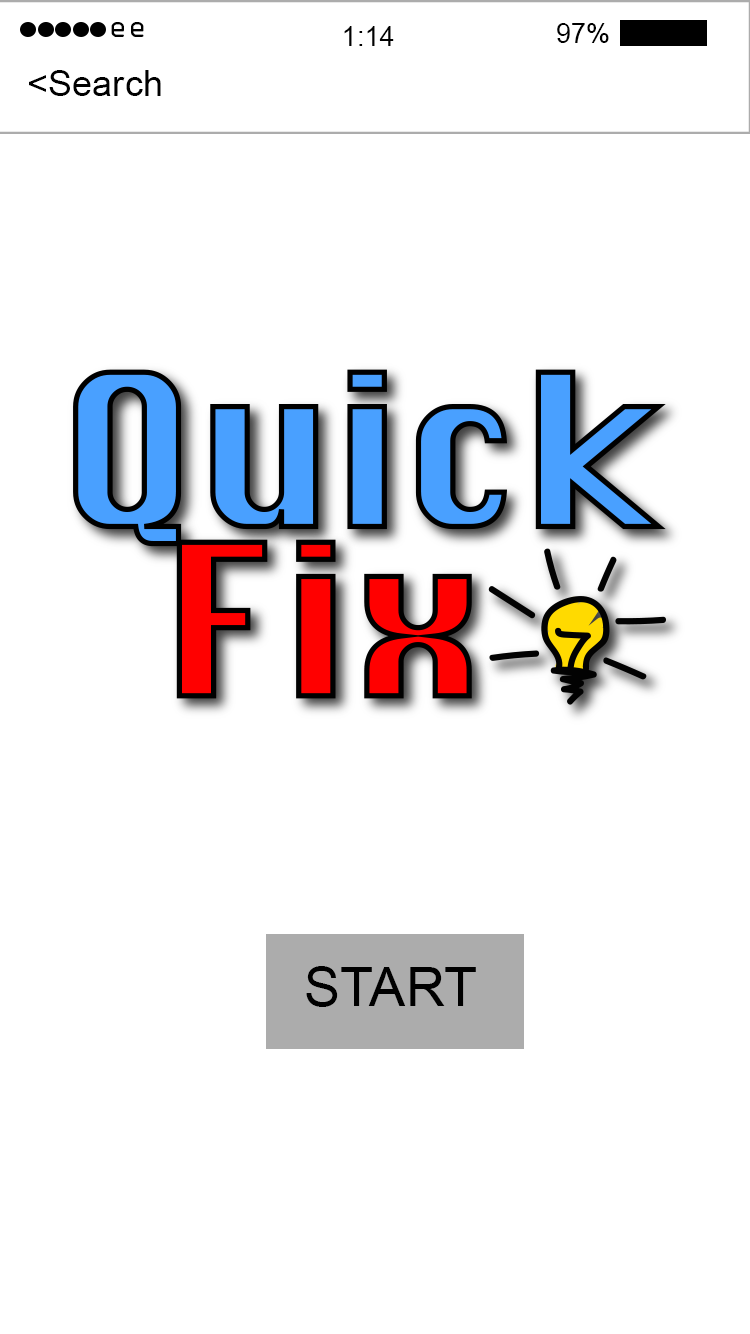
<style>
.page{position:relative;width:750px;height:1334px;background:#ffffff}
.page>*{position:absolute;margin:0}
.t1{font:27.2px "OCRAStd";color:#000000}
.t2{font:27.2px "ArialMT";color:#000000}
.t3{font:36.2px "ArialMT";color:#000000}
.t4{font:54.3px "ArialMT";color:#000000}
</style>
<div class="page">
<p class="t1" style="left:111px;top:22px;width:33px;height:15px">ee</p>
<p class="t2" style="left:344px;top:26px;width:50px;height:20px">1:14</p>
<p class="t2" style="left:557px;top:23px;width:52px;height:20px">97%</p>
<p class="t3" style="left:29px;top:70px;width:132px;height:26px">&lt;Search</p>
<p class="t4" style="left:306px;top:966px;width:170px;height:41px">START</p>
</div>
